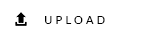
<style>
.page{position:relative;width:160px;height:40px;background:#ffffff}
.page>*{position:absolute;margin:0}
.t1{font:11px "Lato-Regular";letter-spacing:0.3em;color:#000000;text-transform:uppercase}
</style>
<div class="page">
<p class="t1" style="left:45px;top:16px;width:60px;height:8px">Upload</p>
</div>
